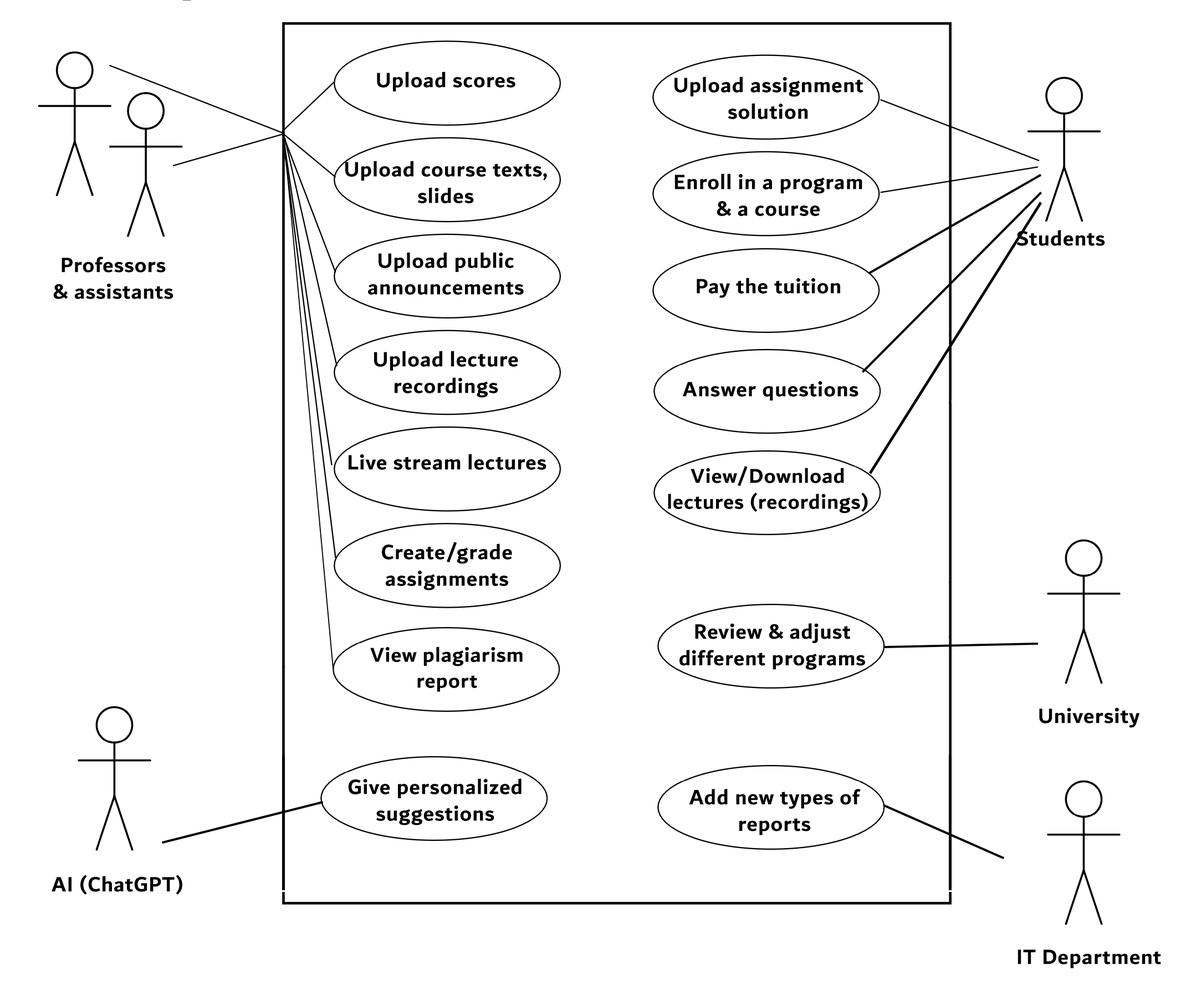
<style>
.page{position:relative;width:1191px;height:1001px;background:#ffffff}
.page>*{position:absolute;margin:0}
.t1{font:22.2px "Dubai-Bold";letter-spacing:0.025em;color:#000000}
.t2{font:21.6px "Dubai-Bold";letter-spacing:0.025em;color:#000000}
</style>
<div class="page">
<p class="t1" style="left:377px;top:71px;width:138px;height:20px">Upload scores</p>
<p class="t1" style="left:674px;top:76px;width:189px;height:43px;text-align:center">Upload assignment solution</p>
<p class="t1" style="left:345px;top:161px;width:202px;height:42px;text-align:center">Upload course texts, slides</p>
<p class="t1" style="left:674px;top:173px;width:188px;height:43px;text-align:center">Enroll in a program <br>&amp; a course</p>
<p class="t1" style="left:1016px;top:230px;width:89px;height:16px">Students</p>
<p class="t1" style="left:53px;top:257px;width:120px;height:42px;text-align:center">Professors <br>&amp; assistants</p>
<p class="t1" style="left:368px;top:252px;width:156px;height:43px;text-align:center">Upload public announcements</p>
<p class="t1" style="left:697px;top:278px;width:143px;height:20px">Pay the tuition</p>
<p class="t1" style="left:374px;top:351px;width:144px;height:47px;text-align:center">Upload lecture recordings</p>
<p class="t1" style="left:682px;top:381px;width:176px;height:20px">Answer questions</p>
<p class="t1" style="left:349px;top:454px;width:197px;height:16px">Live stream lectures</p>
<p class="t2" style="left:668px;top:466px;width:200px;height:48px;text-align:center">View/Download <br>lectures (recordings)</p>
<p class="t1" style="left:382px;top:542px;width:130px;height:49px;text-align:center">Create/grade assignments</p>
<p class="t1" style="left:679px;top:623px;width:186px;height:47px;text-align:center">Review &amp; adjust different programs</p>
<p class="t2" style="left:370px;top:647px;width:153px;height:45px;text-align:center">View plagiarism <br>report</p>
<p class="t1" style="left:1039px;top:708px;width:101px;height:20px">University</p>
<p class="t1" style="left:348px;top:779px;width:173px;height:47px;text-align:center">Give personalized suggestions</p>
<p class="t1" style="left:689px;top:789px;width:172px;height:47px;text-align:center">Add new types of reports</p>
<p class="t1" style="left:52px;top:875px;width:130px;height:20px">AI (ChatGPT)</p>
<p class="t1" style="left:1017px;top:950px;width:144px;height:19px">IT Department</p>
</div>
